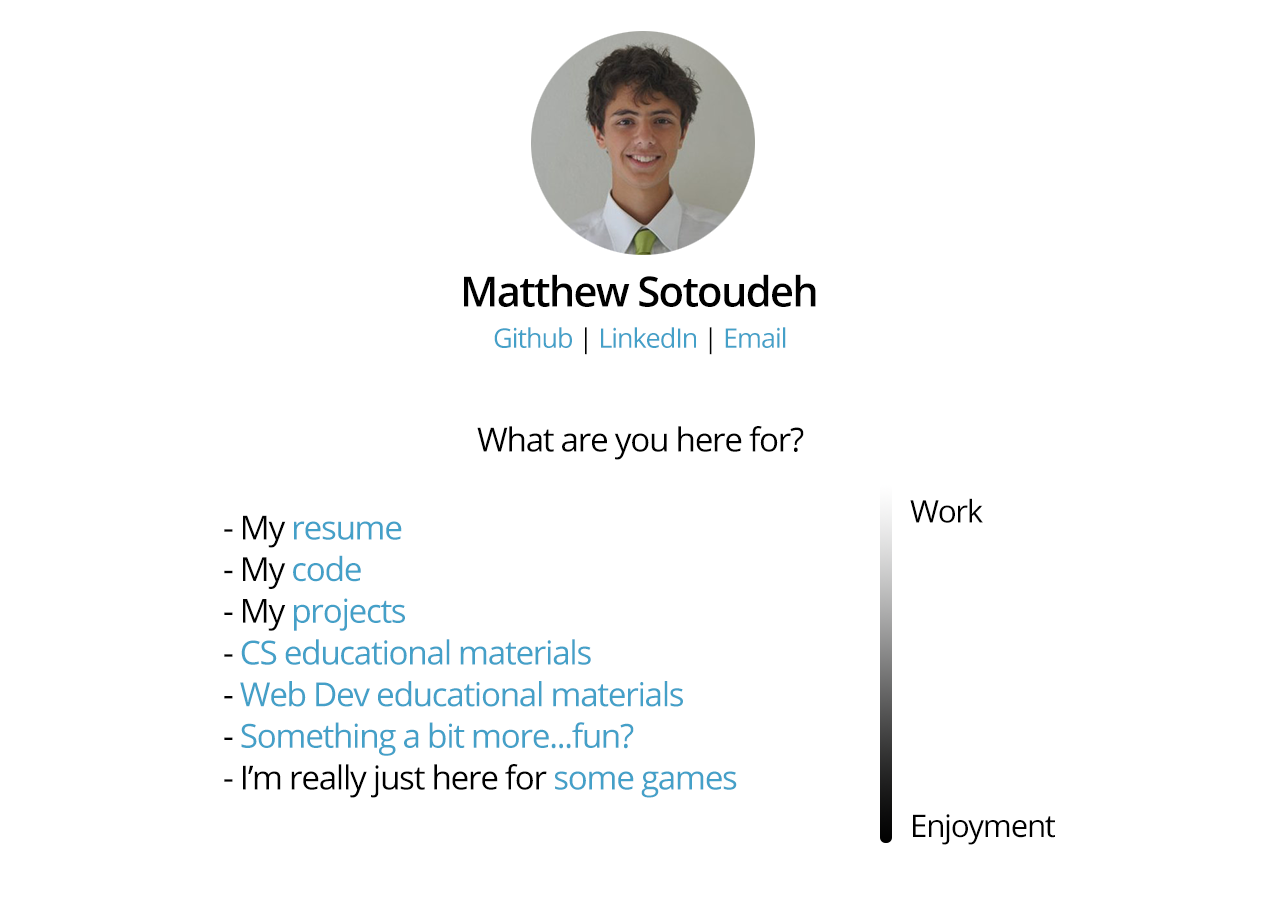
<style>
.page{position:relative;width:1280px;height:915px;background:#ffffff}
.page>*{position:absolute;margin:0}
.t1{font:41.7px "OpenSans-Semibold";letter-spacing:-0.04em;color:#000000}
.t2{font:27.1px "OpenSans";letter-spacing:-0.04em;color:#44a0c8}
.t3{font:27.1px "OpenSans";letter-spacing:-0.04em;color:#000000}
.t4{font:33.3px "OpenSans";letter-spacing:-0.04em;color:#000000}
.t5{font:31.2px "OpenSans";letter-spacing:-0.04em;color:#000000}
.t6{font:33.3px/41.7px "OpenSans";letter-spacing:-0.04em;color:#44a0c8}
.t7{font:33.3px/41.7px "OpenSans";letter-spacing:-0.04em;color:#000000}
</style>
<div class="page">
<p class="t1" style="left:464px;top:274px;width:352px;height:33px">Matthew Sotoudeh</p>
<p class="t2" style="left:494px;top:327px;width:292px;height:28px">Github <span class="t3">| </span>LinkedIn <span class="t3">| </span>Email</p>
<p class="t4" style="left:477px;top:426px;width:327px;height:34px">What are you here for?</p>
<p class="t5" style="left:910px;top:498px;width:73px;height:25px">Work</p>
<p class="t6" style="left:224px;top:515px;width:513px;height:283px"><span class="t7">- My </span>resume<br><span class="t7">- My </span>code<br><span class="t7">- My </span>projects<br><span class="t7">- </span>CS educational materials<br><span class="t7">- </span>Web Dev educational materials<br><span class="t7">- </span>Something a bit more...fun?<br><span class="t7">- I’m really just here for </span>some games</p>
<p class="t5" style="left:913px;top:814px;width:142px;height:31px">Enjoyment</p>
</div>
